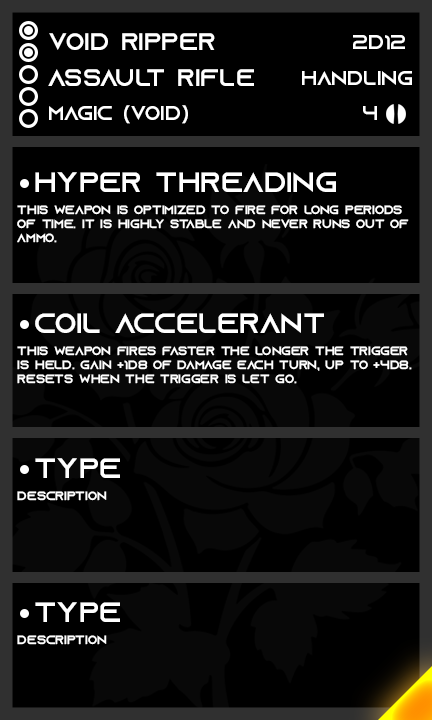
<style>
.page{position:relative;width:432px;height:720px;background:#000000}
.page>*{position:absolute;margin:0}
.t1{font:24px "AzonixRegular";color:#ffffff}
.t2{font:20px "AzonixRegular";color:#ffffff}
.t3{font:28px "AzonixRegular";color:#ffffff}
.t4{font:12px "AzonixRegular";color:#ffffff}
</style>
<div class="page">
<p class="t1" style="left:49px;top:33px;width:166px;height:17px">void ripper</p>
<p class="t2" style="left:353px;top:35px;width:52px;height:15px">2d12</p>
<p class="t1" style="left:48px;top:69px;width:206px;height:17px">assault rifle</p>
<p class="t2" style="left:302px;top:71px;width:110px;height:14px">handling</p>
<p class="t2" style="left:49px;top:105px;width:139px;height:19px">magic (void)</p>
<p class="t2" style="left:363px;top:106px;width:14px;height:14px">4</p>
<p class="t3" style="left:35px;top:172px;width:301px;height:20px">hyper threading</p>
<p class="t4" style="left:17px;top:205px;width:392px;height:38px">this weapon is optimized to fire for long periods<br>of time. it is highly stable and never runs out of<br>ammo.</p>
<p class="t3" style="left:35px;top:313px;width:289px;height:20px">coil accelerant</p>
<p class="t4" style="left:17px;top:346px;width:395px;height:38px">this weapon fires faster the longer the trigger<br>is held. Gain +1d8 of damage each turn, up to +4d8.<br>resets when the trigger is let go.</p>
<p class="t3" style="left:35px;top:458px;width:85px;height:20px">Type</p>
<p class="t4" style="left:17px;top:491px;width:90px;height:10px">Description</p>
<p class="t3" style="left:35px;top:602px;width:85px;height:20px">Type</p>
<p class="t4" style="left:17px;top:635px;width:90px;height:10px">Description</p>
</div>
